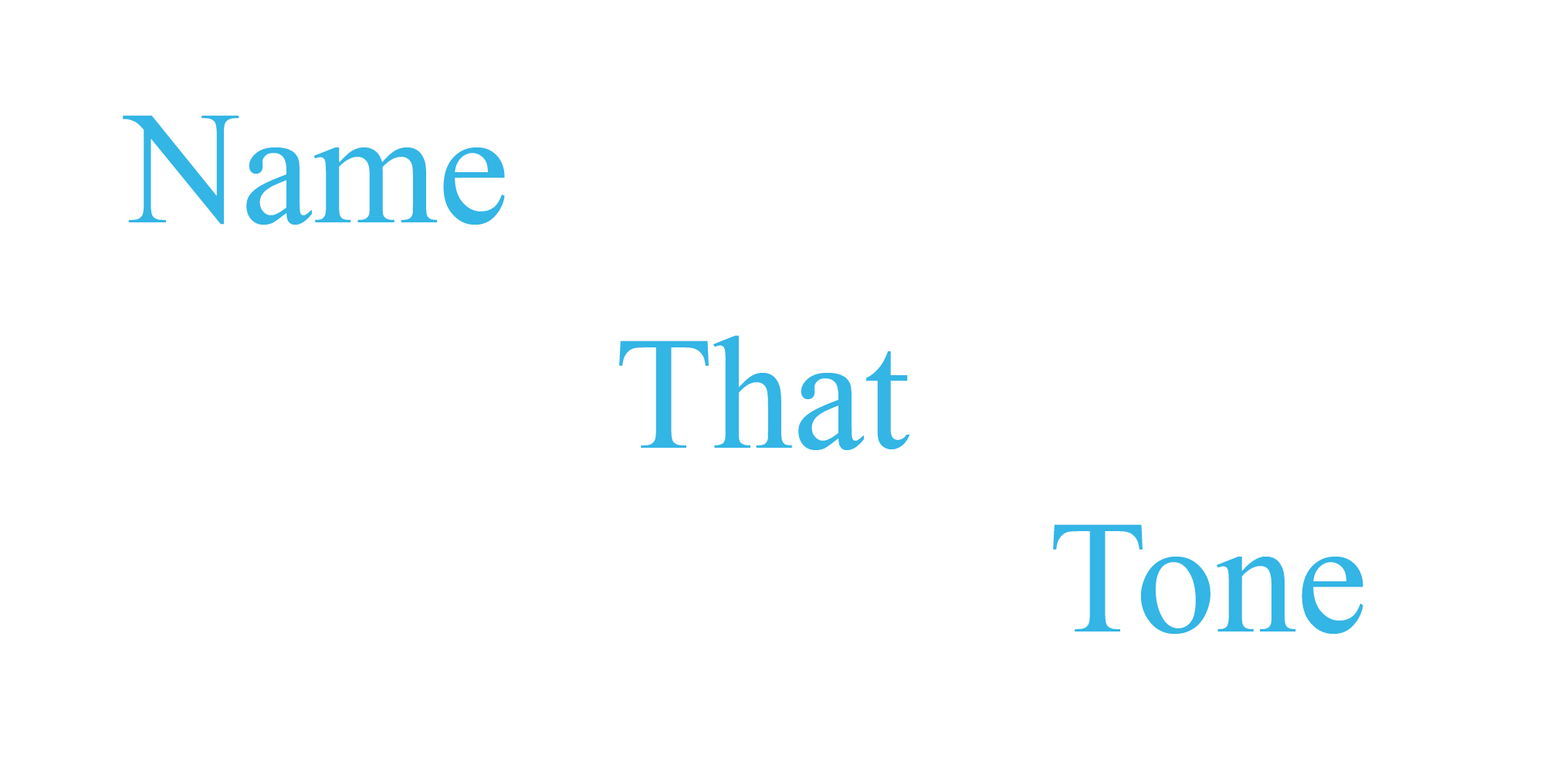
<style>
.page{position:relative;width:1544px;height:772px;background:#ffffff}
.page>*{position:absolute;margin:0}
.t1{font:160.9px "TimesNewRomanPSMT";color:#33b5e5}
</style>
<div class="page">
<p class="t1" style="left:123px;top:115px;width:382px;height:110px">Name</p>
<p class="t1" style="left:619px;top:335px;width:291px;height:115px">That</p>
<p class="t1" style="left:1053px;top:524px;width:311px;height:110px">Tone</p>
</div>
